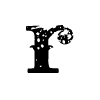
<style>
.page{position:relative;width:100px;height:100px;background:#ffffff}
.page>*{position:absolute;margin:0}
.t1{font:95.8px "BleedingCowboys";color:#000000}
</style>
<div class="page">
<p class="t1" style="left:26px;top:25px;width:48px;height:48px">r</p>
</div>
